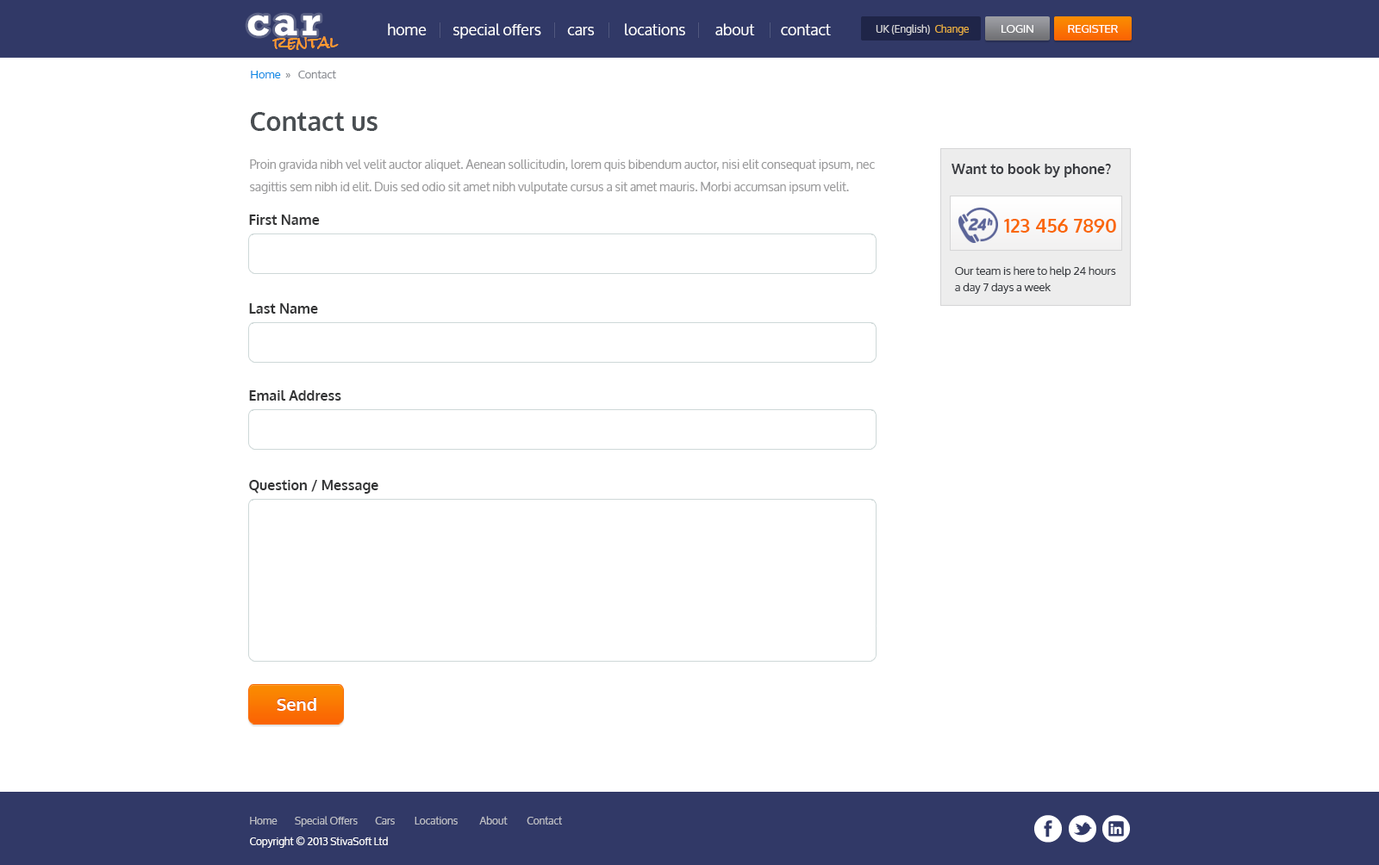
<style>
.page{position:relative;width:1379px;height:865px;background:#ffffff}
.page>*{position:absolute;margin:0}
.t1{font:41.4px "Rockwell-Bold";letter-spacing:0.1em;color:#ffffff}
.t2{font:15.5px "Oxygen";color:#ffffff}
.t3{font:10.3px "Oxygen";color:#d4d4d7}
.t4{font:10.3px "Oxygen";color:#e7ae40}
.t5{font:11.2px "Oxygen";color:#ffffff;text-transform:uppercase}
.t6{font:15.5px "RockSalt";color:#ff9b2f}
.t7{font:11.2px "Oxygen";color:#888b91}
.t8{font:11.2px "Oxygen";color:#0e8be5}
.t9{font:25.8px "Oxygen-Bold";color:#494e52}
.t10{font:12.1px/22.4px "Oxygen";color:#9a9a9b}
.t11{font:13.8px "Oxygen-Bold";color:#3a3c41}
.t12{font:13.8px "Oxygen-Bold";color:#333435}
.t13{font:19px "Oxygen-Bold";color:#fa6804}
.t14{font:11.2px/16.4px "Oxygen";color:#373a3f}
.t15{font:17.3px "Oxygen-Bold";color:#ffffff}
.t16{font:10.3px "Oxygen";color:#bfc0c6}
.t17{font:10.3px/20.7px "Oxygen";color:#ffffff}
</style>
<div class="page">
<p class="t1" style="left:247px;top:15px;width:74px;height:21px">car</p>
<p class="t2" style="left:388px;top:23px;width:443px;height:16px">home        special offers        cars         locations         about        contact</p>
<p class="t3" style="left:875px;top:24px;width:93px;height:11px">UK (English)  <span class="t4">Change</span></p>
<p class="t5" style="left:1001px;top:25px;width:32px;height:8px">Login</p>
<p class="t5" style="left:1067px;top:25px;width:50px;height:8px">Register</p>
<p class="t6" style="left:272px;top:36px;width:67px;height:14px">rental</p>
<p class="t7" style="left:251px;top:70px;width:85px;height:8px"><span class="t8"> Home</span>  »   Contact</p>
<p class="t9" style="left:251px;top:112px;width:126px;height:19px">Contact us</p>
<p class="t10" style="left:250px;top:159px;width:624px;height:35px">Proin gravida nibh vel velit auctor aliquet. Aenean sollicitudin, lorem quis bibendum auctor, nisi elit consequat ipsum, nec sagittis sem nibh id elit. Duis sed odio sit amet nibh vulputate cursus a sit amet mauris. Morbi accumsan ipsum velit.</p>
<p class="t11" style="left:951px;top:164px;width:160px;height:13px">Want to book by phone?</p>
<p class="t12" style="left:249px;top:215px;width:71px;height:10px">First Name</p>
<p class="t13" style="left:1004px;top:219px;width:112px;height:14px">123 456 7890</p>
<p class="t14" style="left:955px;top:266px;width:161px;height:28px">Our team is here to help 24 hours a day 7 days a week</p>
<p class="t12" style="left:249px;top:303px;width:69px;height:11px">Last Name</p>
<p class="t12" style="left:249px;top:390px;width:92px;height:11px">Email Address</p>
<p class="t12" style="left:249px;top:480px;width:129px;height:14px">Question / Message</p>
<p class="t15" style="left:277px;top:698px;width:39px;height:13px">Send</p>
<p class="t16" style="left:250px;top:816px;width:312px;height:32px">Home        Special Offers        Cars         Locations          About         Contact<br><span class="t17">Copyright © 2013 StivaSoft Ltd</span></p>
</div>
